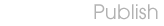
<style>
.page{position:relative;width:164px;height:26px;background:#ffffff}
.page>*{position:absolute;margin:0}
.t1{font:20px "Atlanta-Book";color:#b2b2b2}
</style>
<div class="page">
<p class="t1" style="left:94px;top:4px;width:64px;height:16px">Publish</p>
</div>
